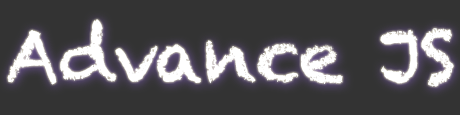
<style>
.page{position:relative;width:460px;height:115px;background:#333333}
.page>*{position:absolute;margin:0}
.t1{font:71.4px "Chalkduster";color:#ffffff}
</style>
<div class="page">
<p class="t1" style="left:7px;top:19px;width:447px;height:68px">Advance JS</p>
</div>
